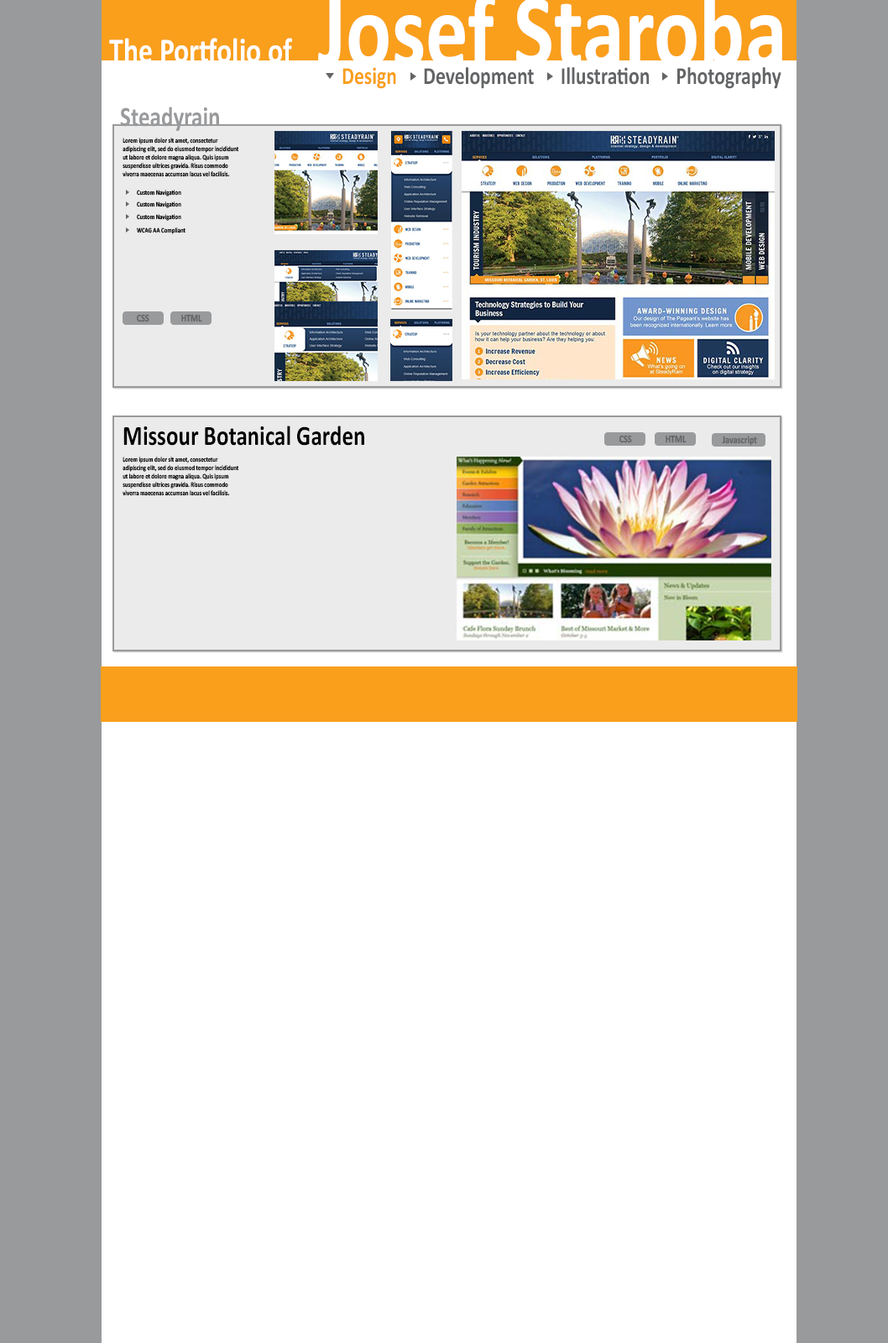
<style>
.page{position:relative;width:888px;height:1343px;background:#ffffff}
.page>*{position:absolute;margin:0}
.t1{font:35px "Calibri-Bold";color:#ffffff;scale:0.81 1}
.t2{font:24.5px "Calibri-Bold";color:#f99f1c;scale:0.81 1}
.t3{font:24.5px "Calibri-Bold";color:#636466;scale:0.81 1}
.t4{font:28px "Calibri-Bold";color:#999a9c;scale:0.81 1}
.t5{font:7px "Calibri-Bold";color:#000000;scale:0.81 1}
.t6{font:10.5px "Calibri-Bold";color:#636466;scale:0.81 1}
.t7{font:28px "Calibri-Bold";color:#000000;scale:0.81 1}
</style>
<div class="page">
<p class="t1" style="left:109px;top:38px;width:183px;height:25px">The Portfolio of</p>
<p class="t2" style="left:342px;top:67px;width:54px;height:22px">Design</p>
<p class="t3" style="left:424px;top:67px;width:110px;height:22px">Development</p>
<p class="t3" style="left:561px;top:67px;width:88px;height:18px">Illustration</p>
<p class="t3" style="left:677px;top:67px;width:104px;height:22px">Photography</p>
<p class="t4" style="left:120px;top:107px;width:99px;height:24px">Steadyrain</p>
<p class="t5" style="left:123px;top:138px;width:116px;height:39px">Lorem ipsum dolor sit amet, consectetur adipiscing elit, sed do eiusmod tempor incididunt ut labore et dolore magna aliqua. Quis ipsum suspendisse ultrices gravida. Risus commodo viverra maecenas accumsan lacus vel facilisis.</p>
<p class="t5" style="left:137px;top:190px;width:44px;height:6px">Custom Navigation</p>
<p class="t5" style="left:137px;top:201px;width:44px;height:7px">Custom Navigation</p>
<p class="t5" style="left:137px;top:214px;width:44px;height:7px">Custom Navigation</p>
<p class="t5" style="left:137px;top:227px;width:48px;height:7px">WCAG AA Compliant</p>
<p class="t6" style="left:137px;top:314px;width:12px;height:8px">CSS</p>
<p class="t6" style="left:181px;top:314px;width:21px;height:8px">HTML</p>
<p class="t7" style="left:123px;top:426px;width:241px;height:20px">Missour Botanical Garden</p>
<p class="t6" style="left:619px;top:435px;width:13px;height:8px">CSS</p>
<p class="t6" style="left:666px;top:435px;width:21px;height:8px">HTML</p>
<p class="t6" style="left:722px;top:436px;width:35px;height:10px">Javascript</p>
<p class="t5" style="left:123px;top:457px;width:116px;height:39px">Lorem ipsum dolor sit amet, consectetur adipiscing elit, sed do eiusmod tempor incididunt ut labore et dolore magna aliqua. Quis ipsum suspendisse ultrices gravida. Risus commodo viverra maecenas accumsan lacus vel facilisis.</p>
</div>
